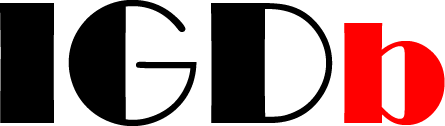
<style>
.page{position:relative;width:445px;height:126px;background:#ffffff}
.page>*{position:absolute;margin:0}
.t1{font:180px "Broadway";color:#000000}
.t2{font:150px "Broadway";color:#ff0000}
</style>
<div class="page">
<p class="t1" style="left:0px;top:0px;width:445px;height:126px">IGD<span class="t2">b</span></p>
</div>
